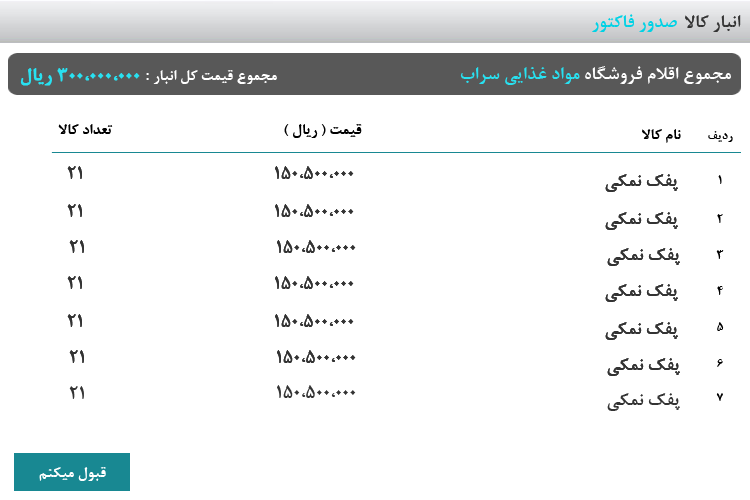
<style>
.page{position:relative;width:750px;height:500px;background:#ffffff}
.page>*{position:absolute;margin:0}
.t1{font:20px "BNazaninBold";color:#00d2e5}
.t2{font:20px "BNazaninBold";color:#333333}
.t3{font:16.7px "BNazaninBold";color:#ffffff}
.t4{font:20px "BNazaninBold";color:#ffffff}
.t5{font:20px "BNazaninBold";color:#28e1f1;font-weight:bold}
.t6{font:20px "BNazaninBold";color:#28e1f1}
.t7{font:16.7px "BNazaninBold";color:#000000}
.t8{font:13.3px "BNazaninBold";color:#000000}
</style>
<div class="page">
<p class="t1" style="left:592px;top:14px;width:85px;height:18px">صدور فاکتور</p>
<p class="t2" style="left:685px;top:15px;width:56px;height:17px">انبار کالا</p>
<p class="t3" style="left:20px;top:68px;width:257px;height:18px">مجموع قیمت کل انبار<span class="t4"> : </span><span class="t5">300،000،000 ریال</span></p>
<p class="t4" style="left:460px;top:66px;width:271px;height:19px">مجموع اقلام فروشگاه <span class="t6">مواد غذایی سراب</span></p>
<p class="t7" style="left:58px;top:124px;width:55px;height:10px">تعداد کالا</p>
<p class="t7" style="left:284px;top:124px;width:78px;height:14px">قیمت ( ریال )</p>
<p class="t7" style="left:642px;top:129px;width:39px;height:14px">نام کالا</p>
<p class="t8" style="left:708px;top:131px;width:25px;height:11px">ردیف</p>
<p class="t2" style="left:67px;top:166px;width:15px;height:13px">21</p>
<p class="t2" style="left:67px;top:166px;width:15px;height:13px">21</p>
<p class="t2" style="left:275px;top:166px;width:79px;height:13px">150،500،000</p>
<p class="t2" style="left:275px;top:166px;width:79px;height:13px">150،500،000</p>
<p class="t2" style="left:605px;top:174px;width:73px;height:18px">پفک نمکی</p>
<p class="t2" style="left:605px;top:174px;width:73px;height:18px">پفک نمکی</p>
<p class="t8" style="left:718px;top:175px;width:4px;height:9px">1</p>
<p class="t2" style="left:67px;top:204px;width:15px;height:13px">21</p>
<p class="t2" style="left:67px;top:204px;width:15px;height:13px">21</p>
<p class="t2" style="left:275px;top:204px;width:79px;height:13px">150،500،000</p>
<p class="t2" style="left:275px;top:204px;width:79px;height:13px">150،500،000</p>
<p class="t2" style="left:605px;top:212px;width:73px;height:18px">پفک نمکی</p>
<p class="t2" style="left:605px;top:212px;width:73px;height:18px">پفک نمکی</p>
<p class="t8" style="left:717px;top:214px;width:6px;height:9px">2</p>
<p class="t2" style="left:69px;top:240px;width:15px;height:13px">21</p>
<p class="t2" style="left:69px;top:240px;width:15px;height:13px">21</p>
<p class="t2" style="left:277px;top:240px;width:79px;height:13px">150،500،000</p>
<p class="t2" style="left:277px;top:240px;width:79px;height:13px">150،500،000</p>
<p class="t2" style="left:607px;top:248px;width:73px;height:18px">پفک نمکی</p>
<p class="t2" style="left:607px;top:248px;width:73px;height:18px">پفک نمکی</p>
<p class="t8" style="left:716px;top:250px;width:8px;height:9px">3</p>
<p class="t2" style="left:67px;top:276px;width:15px;height:13px">21</p>
<p class="t2" style="left:67px;top:276px;width:15px;height:13px">21</p>
<p class="t2" style="left:275px;top:276px;width:79px;height:13px">150،500،000</p>
<p class="t2" style="left:275px;top:276px;width:79px;height:13px">150،500،000</p>
<p class="t2" style="left:605px;top:284px;width:73px;height:18px">پفک نمکی</p>
<p class="t2" style="left:605px;top:284px;width:73px;height:18px">پفک نمکی</p>
<p class="t8" style="left:717px;top:286px;width:6px;height:9px">4</p>
<p class="t2" style="left:67px;top:314px;width:15px;height:13px">21</p>
<p class="t2" style="left:67px;top:314px;width:15px;height:13px">21</p>
<p class="t2" style="left:275px;top:314px;width:79px;height:13px">150،500،000</p>
<p class="t2" style="left:275px;top:314px;width:79px;height:13px">150،500،000</p>
<p class="t2" style="left:605px;top:322px;width:73px;height:18px">پفک نمکی</p>
<p class="t2" style="left:605px;top:322px;width:73px;height:18px">پفک نمکی</p>
<p class="t8" style="left:717px;top:322px;width:7px;height:9px">5</p>
<p class="t2" style="left:69px;top:350px;width:15px;height:13px">21</p>
<p class="t2" style="left:69px;top:350px;width:15px;height:13px">21</p>
<p class="t2" style="left:277px;top:350px;width:79px;height:13px">150،500،000</p>
<p class="t2" style="left:277px;top:350px;width:79px;height:13px">150،500،000</p>
<p class="t2" style="left:607px;top:358px;width:73px;height:18px">پفک نمکی</p>
<p class="t2" style="left:607px;top:358px;width:73px;height:18px">پفک نمکی</p>
<p class="t8" style="left:717px;top:359px;width:6px;height:8px">6</p>
<p class="t2" style="left:69px;top:386px;width:15px;height:13px">21</p>
<p class="t2" style="left:277px;top:385px;width:79px;height:13px">150،500،000</p>
<p class="t2" style="left:607px;top:393px;width:73px;height:18px">پفک نمکی</p>
<p class="t8" style="left:716px;top:393px;width:7px;height:8px">7</p>
<p class="t3" style="left:39px;top:467px;width:67px;height:14px">قبول میکنم</p>
</div>
